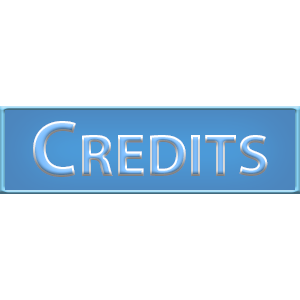
<style>
.page{position:relative;width:300px;height:300px;background:#ffffff}
.page>*{position:absolute;margin:0}
.t1{font:60px "MyriadPro-Bold"}
.t2{font:80px "MyriadPro-Bold"}
</style>
<div class="page">
<p class="t1" style="left:33px;top:121px;width:235px;height:56px"><span class="t2">C</span>REDITS</p>
</div>
